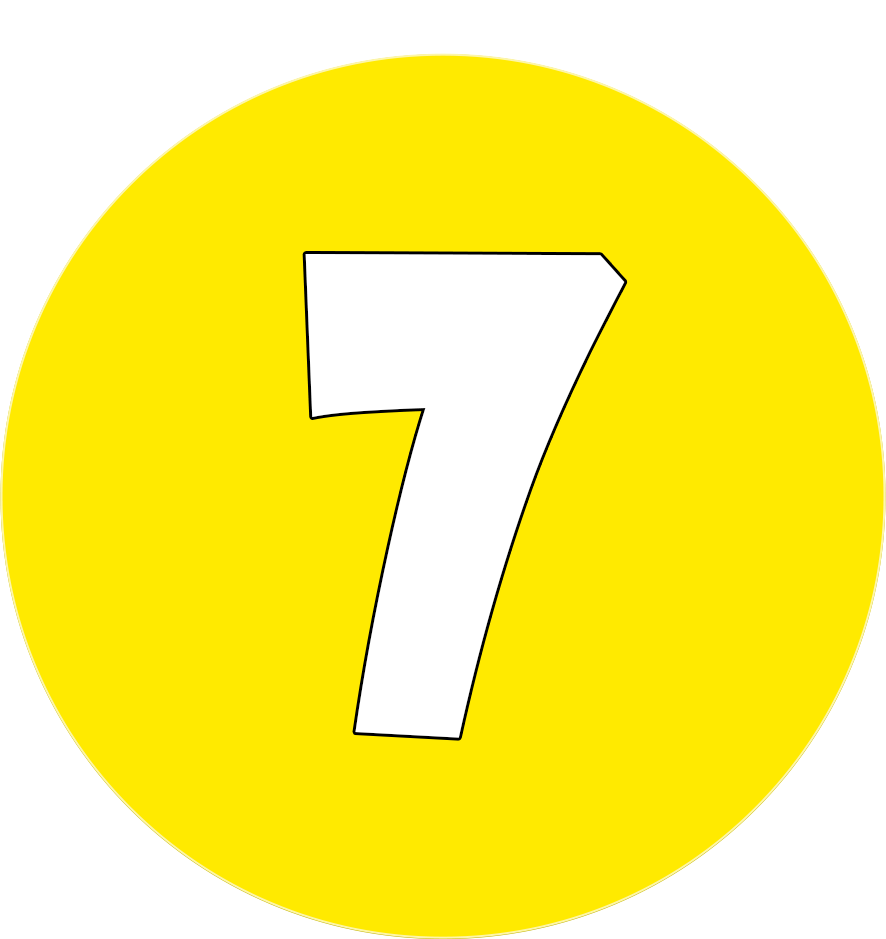
<style>
.page{position:relative;width:886px;height:939px;background:#ffea00}
.page>*{position:absolute;margin:0}
.t1{font:637.2px "ShowcardGothic-Reg";color:#ffffff}
</style>
<div class="page">
<p class="t1" style="left:305px;top:254px;width:320px;height:484px">7</p>
</div>
